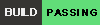
<style>
.page{position:relative;width:100px;height:25px;background:#61dd78}
.page>*{position:absolute;margin:0}
.t1{font:11.1px "ArialMT";letter-spacing:-0.015em;color:#eeeeee;font-variant:small-caps;font-weight:bold}
.t2{font:12.3px "ArialMT";letter-spacing:-0.015em;color:#020202;font-variant:small-caps;font-weight:bold}
</style>
<div class="page">
<p class="t1" style="left:5px;top:8px;width:32px;height:8px">BUILD</p>
<p class="t2" style="left:47px;top:9px;width:50px;height:7px">passing</p>
</div>
